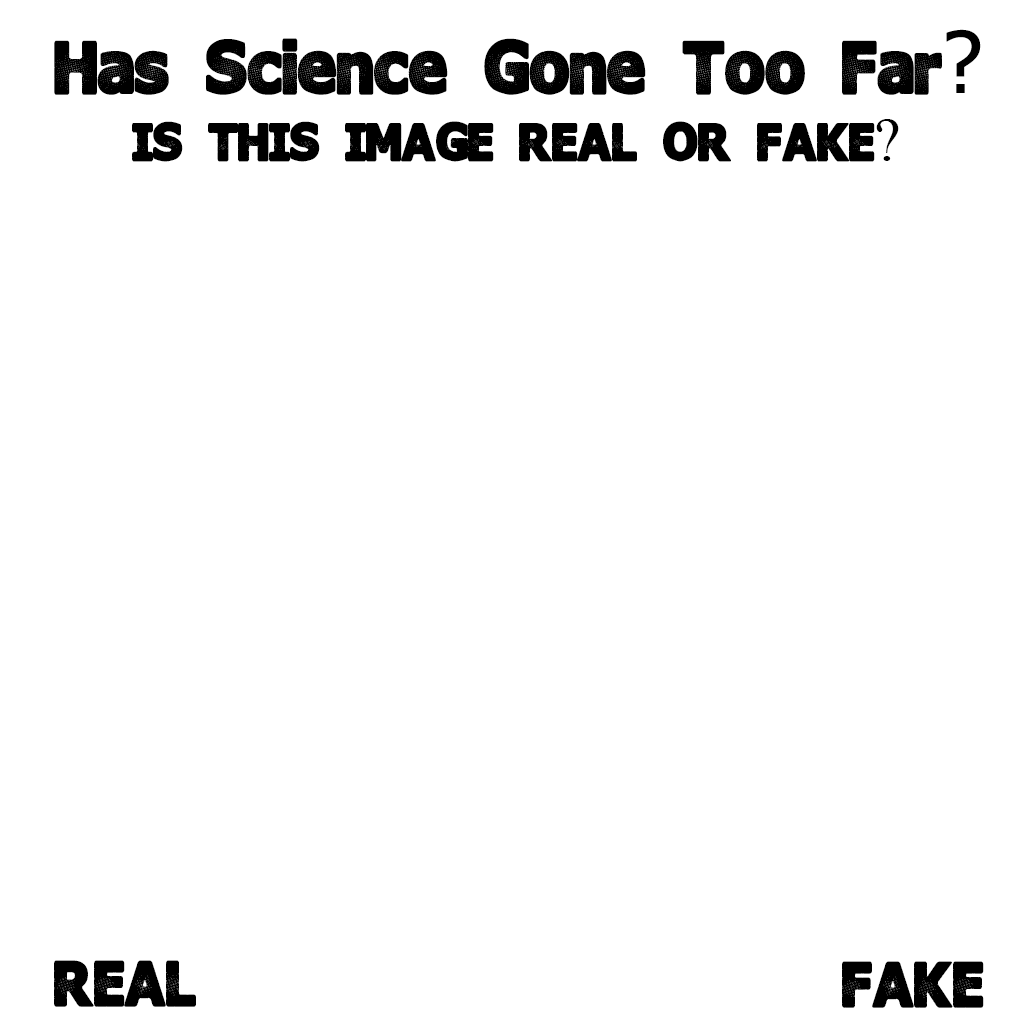
<style>
.page{position:relative;width:1024px;height:1024px;background:#ffffff}
.page>*{position:absolute;margin:0}
.t1{font:85px "InterFade";color:#000000}
.t2{font:85px "Tahoma";color:#000000}
.t3{font:60px "InterFade";color:#000000}
.t4{font:60px "TimesNewRomanPSMT";color:#000000}
.t5{font:72px "InterFade";color:#000000}
</style>
<div class="page">
<p class="t1" style="left:54px;top:29px;width:927px;height:66px">Has Science Gone Too Far<span class="t2">?</span></p>
<p class="t3" style="left:132px;top:119px;width:767px;height:43px">IS THIS IMAGE REAL OR FAKE<span class="t4">?</span></p>
<p class="t5" style="left:54px;top:960px;width:142px;height:47px">REAL</p>
<p class="t5" style="left:842px;top:961px;width:142px;height:47px">FAKE</p>
</div>
